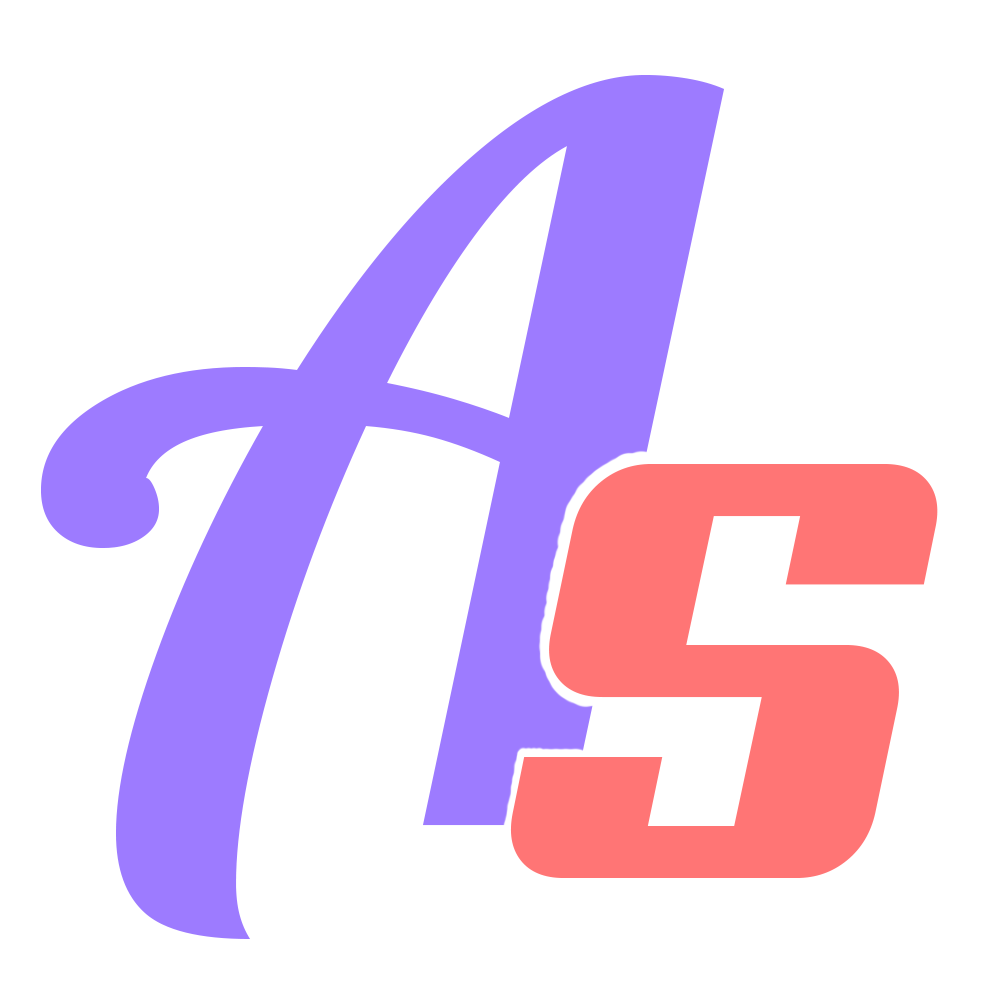
<style>
.page{position:relative;width:1000px;height:1000px;background:#ffffff}
.page>*{position:absolute;margin:0}
.t1{font:600px "Aero";color:#ff7575}
</style>
<div class="page">
<p class="t1" style="left:510px;top:464px;width:428px;height:414px">S</p>
</div>
